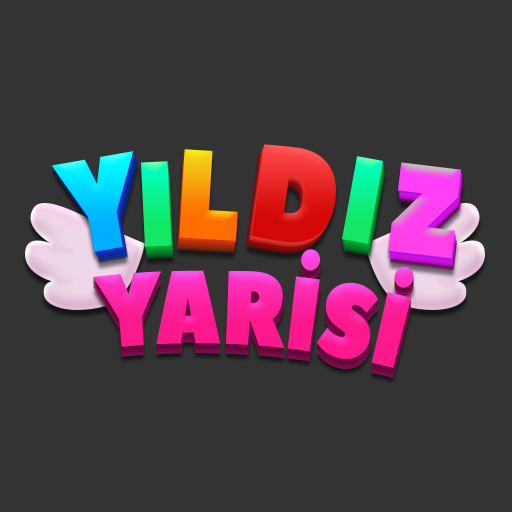
<style>
.page{position:relative;width:512px;height:512px;background:#333333}
.page>*{position:absolute;margin:0}
.t1{font:126.1px "PeaceSans";text-transform:uppercase;scale:0.85 1}
.t2{font:131.8px "PeaceSans";text-transform:uppercase;scale:0.85 1}
.t3{font:120.4px "PeaceSans";text-transform:uppercase;scale:0.85 1}
.t4{font:127.3px "PeaceSans";color:#fe40ec;text-transform:uppercase;scale:0.85 1}
.t5{font:104.1px "PeaceSans";color:#fd1f9b;text-transform:uppercase;scale:0.77 1}
</style>
<div class="page">
<p class="t1" style="left:179px;top:149px;width:59px;height:92px;rotate:3deg">l</p>
<p class="t2" style="left:251px;top:144px;width:85px;height:99px;rotate:8deg">D</p>
<p class="t2" style="left:51px;top:151px;width:83px;height:101px;rotate:-10deg">y</p>
<p class="t3" style="left:141px;top:161px;width:31px;height:86px;rotate:-3deg">i</p>
<p class="t3" style="left:342px;top:156px;width:42px;height:88px;rotate:10deg">i</p>
<p class="t4" style="left:388px;top:162px;width:74px;height:97px;rotate:7deg">z</p>
<p class="t5" style="left:92px;top:249px;width:322px;height:119px;rotate:4deg">yarİSİ</p>
</div>
